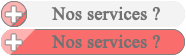
<style>
.page{position:relative;width:186px;height:56px;background:#f3f3f3}
.page>*{position:absolute;margin:0}
.t1{font:18px "TimesNewRomanPSMT";letter-spacing:-0.01em;color:#727272;font-weight:bold}
</style>
<div class="page">
<p class="t1" style="left:51px;top:6px;width:109px;height:15px">Nos services ?</p>
<p class="t1" style="left:51px;top:34px;width:109px;height:15px">Nos services ?</p>
</div>
